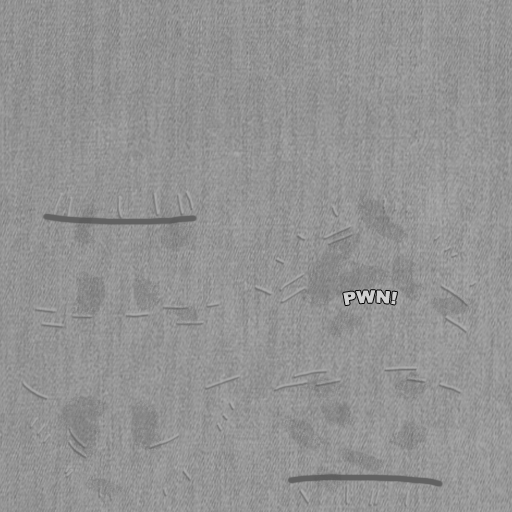
<style>
.page{position:relative;width:512px;height:512px}
.page>*{position:absolute;margin:0}
.t1{font:17px "Arial-Black";color:#cfcfcf}
</style>
<div class="page">
<p class="t1" style="left:343px;top:290px;width:54px;height:16px;rotate:-1deg">PWN!</p>
</div>
